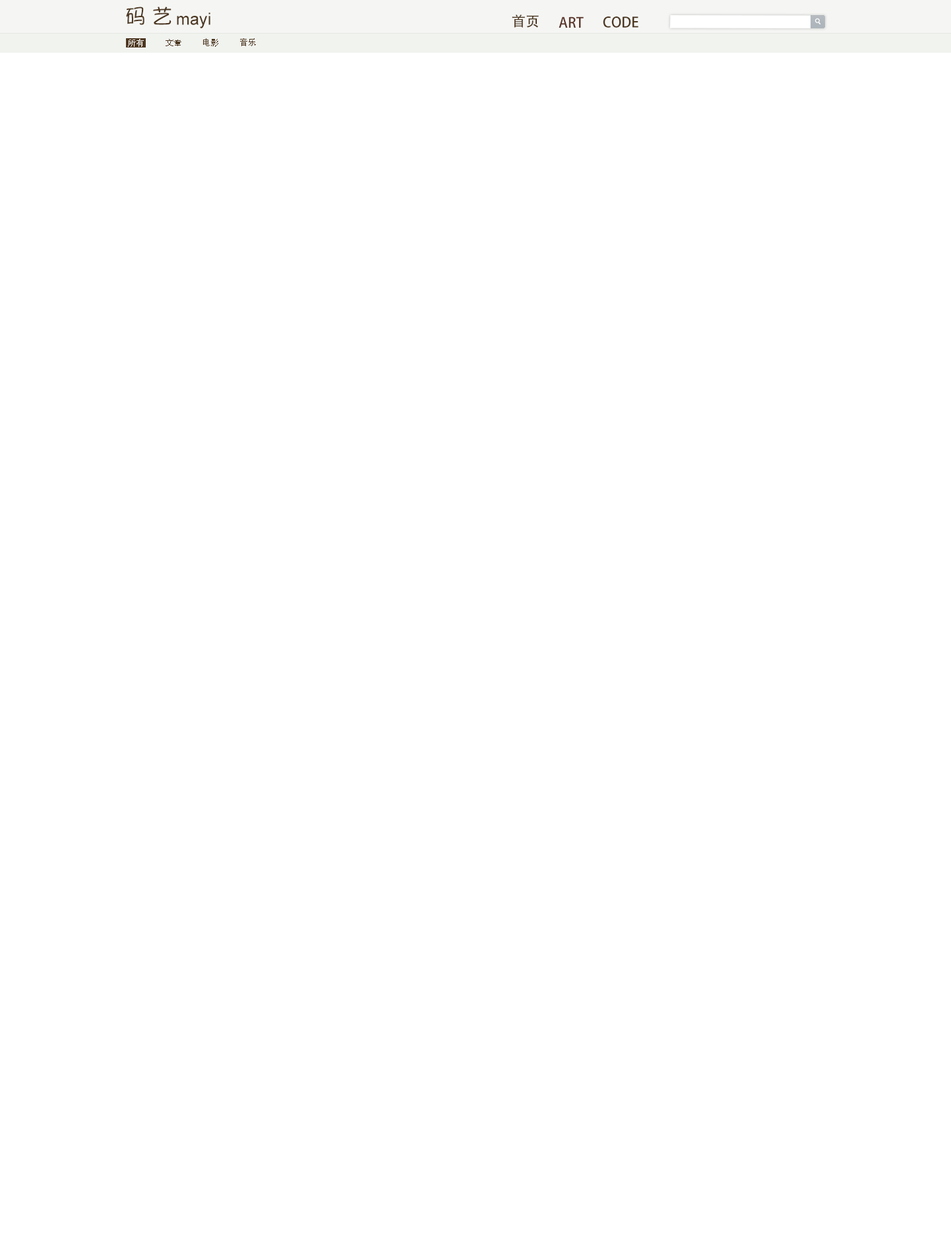
<style>
.page{position:relative;width:951px;height:1253px;background:#ffffff}
.page>*{position:absolute;margin:0}
.t1{font:20.9px "YuppySC-Regular";color:#4d3721}
.t2{font:16.7px "ArialMT";color:#4d3721}
.t3{font:16.7px "ArialMT";color:#faf6f6}
.t4{font:13.9px "AdobeHeitiStd-Regular";color:#4d3721}
.t5{font:13.9px "AdobeHeitiStd-Regular";color:#5d372d}
.t6{font:8.6px "AdobeHeitiStd-Regular";color:#ffffff}
.t7{font:8.6px "AdobeHeitiStd-Regular";color:#4d3721}
</style>
<div class="page">
<p class="t1" style="left:126px;top:7px;width:46px;height:18px">码 艺</p>
<p class="t2" style="left:177px;top:13px;width:33px;height:15px"><span class="t3"> </span>mayi</p>
<p class="t4" style="left:512px;top:15px;width:27px;height:13px">首页</p>
<p class="t5" style="left:559px;top:16px;width:25px;height:12px">ART</p>
<p class="t4" style="left:603px;top:16px;width:36px;height:12px">CODE</p>
<p class="t6" style="left:128px;top:39px;width:16px;height:8px">所有</p>
<p class="t7" style="left:166px;top:39px;width:15px;height:7px">文章</p>
<p class="t7" style="left:203px;top:38px;width:15px;height:9px">电影</p>
<p class="t7" style="left:240px;top:38px;width:16px;height:8px">音乐</p>
</div>
